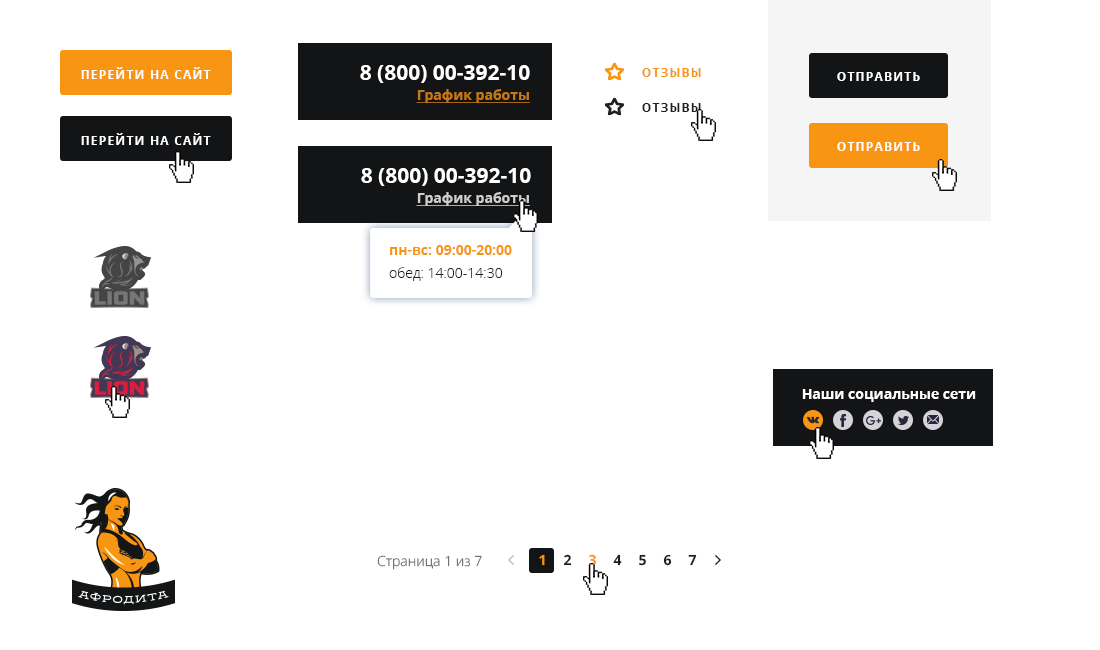
<style>
.page{position:relative;width:1100px;height:650px;background:#ffffff}
.page>*{position:absolute;margin:0}
.t1{font:21px "OpenSans-Bold";color:#ffffff;text-transform:uppercase}
.t2{font:12px "OpenSans-Bold";letter-spacing:0.1em;color:#ffffff;text-transform:uppercase}
.t3{font:12px "OpenSans-Bold";letter-spacing:0.1em;color:#f89513;text-transform:uppercase}
.t4{font:14px "OpenSans-Bold";color:#c77814;text-decoration:underline}
.t5{font:12px "OpenSans-Bold";letter-spacing:0.1em;color:#221f1f;text-transform:uppercase}
.t6{font:14px "OpenSans-Bold";color:#cdcdcd;text-decoration:underline}
.t7{font:14px/18px "OpenSans-Bold";color:#f89513}
.t8{font:14px/18px "OpenSans-Light";color:#221f1f}
.t9{font:14px "OpenSans-Bold";color:#ffffff}
.t10{font:14px "OpenSans-Light";color:#656464}
.t11{font:14px "OpenSans-Bold";color:#f89513}
.t12{font:14px "OpenSans-Bold";color:#221f1f}
</style>
<div class="page">
<p class="t1" style="left:360px;top:65px;width:170px;height:18px">8 (800) 00-392-10</p>
<p class="t2" style="left:81px;top:67px;width:130px;height:12px">Перейти на сайт</p>
<p class="t3" style="left:642px;top:68px;width:59px;height:9px">Отзывы</p>
<p class="t2" style="left:837px;top:72px;width:83px;height:9px">Отправить</p>
<p class="t4" style="left:416px;top:89px;width:114px;height:14px">График работы</p>
<p class="t5" style="left:642px;top:103px;width:59px;height:9px">Отзывы</p>
<p class="t2" style="left:81px;top:133px;width:130px;height:12px">Перейти на сайт</p>
<p class="t2" style="left:837px;top:142px;width:83px;height:9px">Отправить</p>
<p class="t1" style="left:361px;top:168px;width:170px;height:18px">8 (800) 00-392-10</p>
<p class="t6" style="left:416px;top:192px;width:114px;height:14px">График работы</p>
<p class="t7" style="left:389px;top:245px;width:123px;height:36px">пн-вс: 09:00-20:00<br><span class="t8">обед: 14:00-14:30</span></p>
<p class="t9" style="left:802px;top:389px;width:174px;height:13px">Наши социальные сети</p>
<p class="t10" style="left:377px;top:555px;width:105px;height:15px">Страница 1 из 7</p>
<p class="t11" style="left:539px;top:554px;width:6px;height:12px">1</p>
<p class="t12" style="left:563px;top:554px;width:9px;height:12px">2</p>
<p class="t11" style="left:588px;top:554px;width:8px;height:12px">3</p>
<p class="t12" style="left:613px;top:554px;width:9px;height:12px">4</p>
<p class="t12" style="left:639px;top:554px;width:7px;height:12px">5</p>
<p class="t12" style="left:663px;top:554px;width:9px;height:12px">6</p>
<p class="t12" style="left:688px;top:554px;width:9px;height:12px">7</p>
</div>
